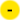
<style>
.page{position:relative;width:20px;height:20px;background:#ffe400}
.page>*{position:absolute;margin:0}
.t1{font:18.1px "UTM-Helve";color:#000000}
</style>
<div class="page">
<p class="t1" style="left:7px;top:9px;width:5px;height:3px">-</p>
</div>
